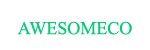
<style>
.page{position:relative;width:150px;height:50px;background:#ffffff}
.page>*{position:absolute;margin:0}
.t1{font:18px "TimesNewRomanPSMT";color:#07cb79}
</style>
<div class="page">
<p class="t1" style="left:17px;top:21px;width:115px;height:14px">AWESOMECO</p>
</div>
